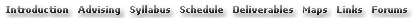
<style>
.page{position:relative;width:415px;height:18px;background:#ffffff}
.page>*{position:absolute;margin:0}
.t1{font:9px "Verdana-Bold"}
</style>
<div class="page">
<p class="t1" style="left:6px;top:5px;width:401px;height:10px">Introduction   Advising   Syllabus   Schedule   Deliverables   Maps   Links   Forums</p>
</div>
